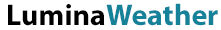
<style>
.page{position:relative;width:221px;height:30px;background:#ffffff}
.page>*{position:absolute;margin:0}
.t1{font:30px "MyriadPro-Bold";color:#158299}
.t2{font:30px "MyriadPro-Bold";color:#000000}
</style>
<div class="page">
<p class="t1" style="left:8px;top:3px;width:210px;height:23px"><span class="t2">Lumina</span>Weather</p>
</div>
